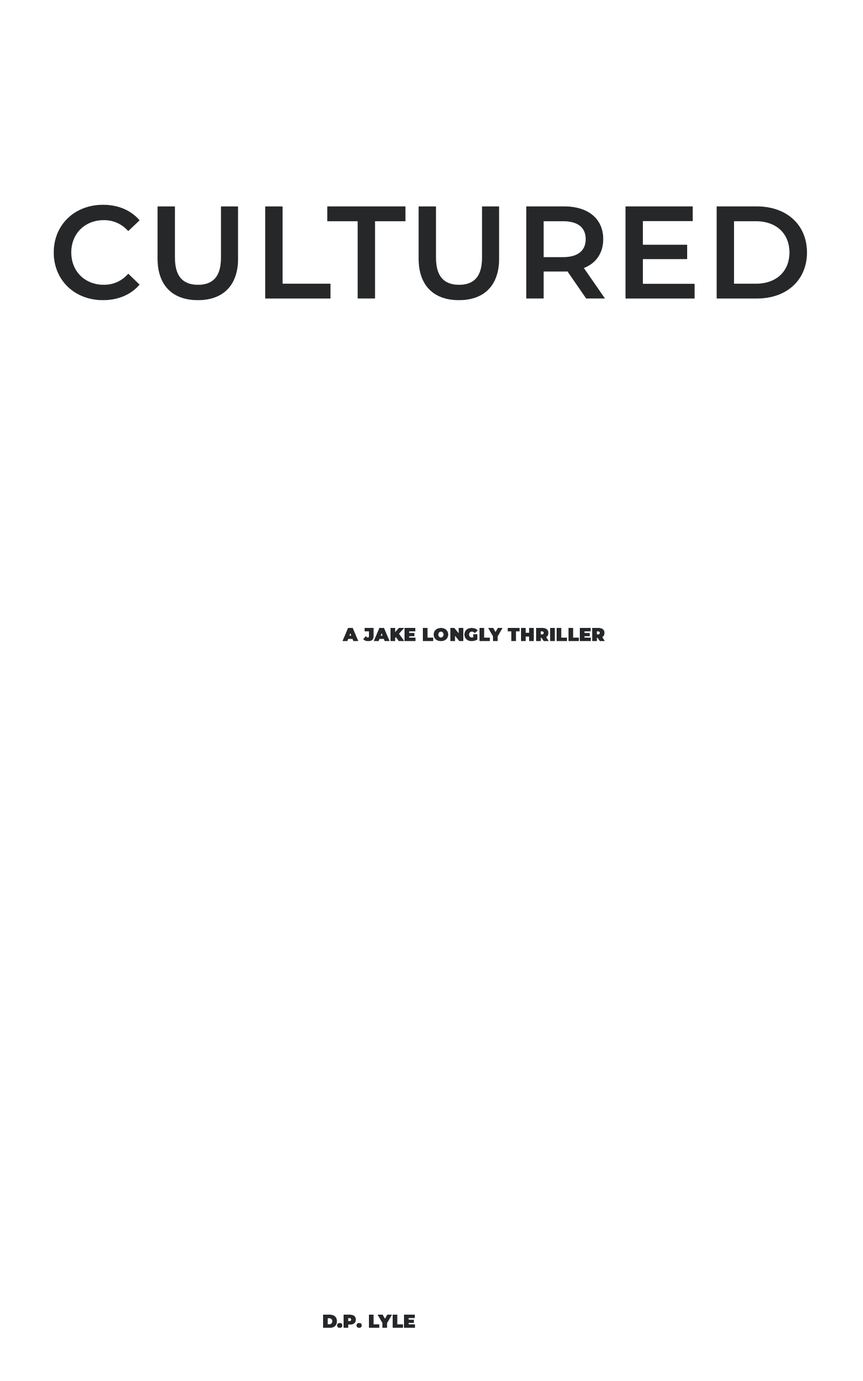
<style>
.page{position:relative;width:863px;height:1381px;background:#ffffff}
.page>*{position:absolute;margin:0}
.t1{font:131px "Montserrat-SemiBold";color:#262729;font-weight:bold}
.t2{font:18px "Montserrat-Black";color:#262729;font-weight:bold}
</style>
<div class="page">
<p class="t1" style="left:53px;top:204px;width:755px;height:97px">CULTURED</p>
<p class="t2" style="left:343px;top:628px;width:262px;height:14px">A JAKE LONGLY THRILLER</p>
<p class="t2" style="left:323px;top:1315px;width:92px;height:13px">D.P. LYLE</p>
</div>
